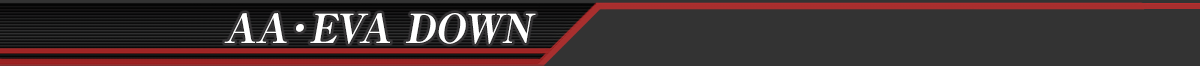
<style>
.page{position:relative;width:1200px;height:66px;background:#333333}
.page>*{position:absolute;margin:0}
.t1{font:40px "RyuminPro-ExBold";color:#ffffff;font-style:italic}
</style>
<div class="page">
<p class="t1" style="left:224px;top:13px;width:312px;height:31px">AA・EVA DOWN</p>
</div>
